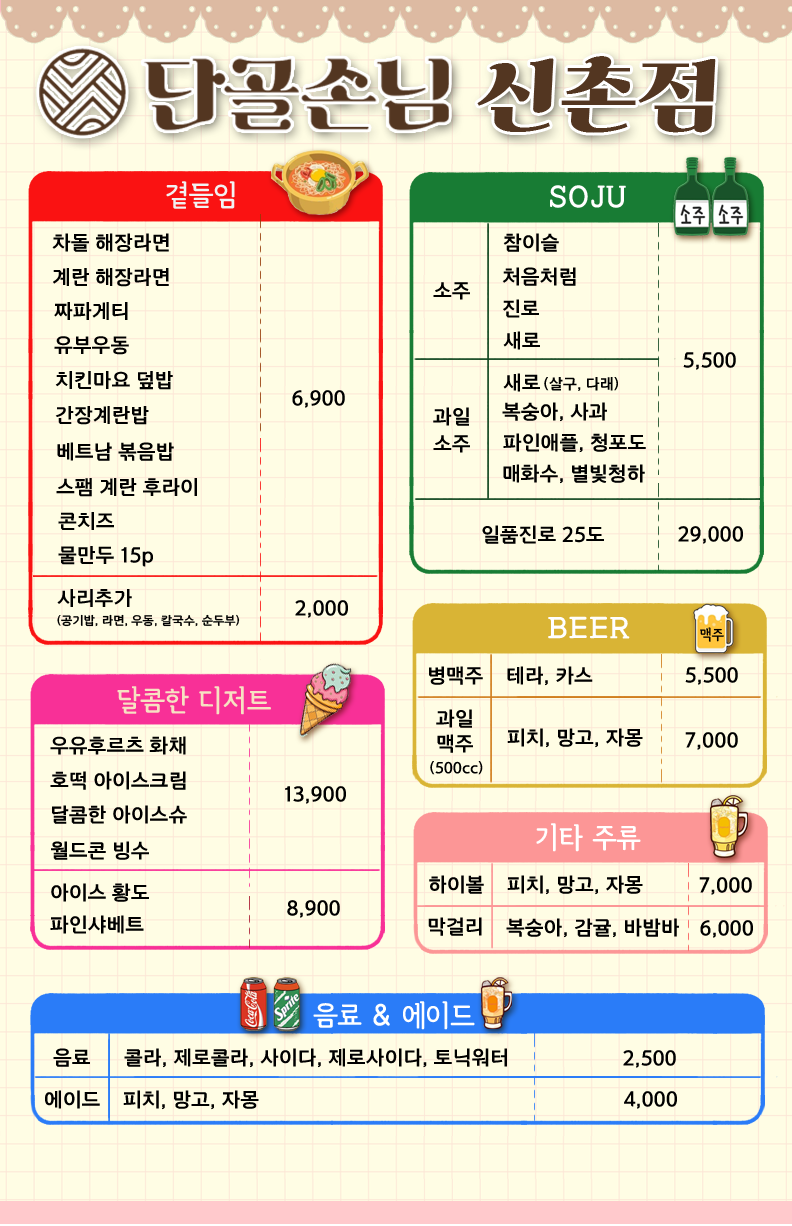
<style>
.page{position:relative;width:792px;height:1226px;background:#fffde4}
.page>*{position:absolute;margin:0}
.t1{font:82px "ghanachoco";color:#533621}
.t2{font:30px "Pix_HeummTalnemogulim162";color:#f2f2f2}
.t3{font:30px "Pix_HeummTalnemogulim162";color:#ffffff}
.t4{font:20px "ELANDChoiceB";color:#000000}
.t5{font:15px "ELANDChoiceB";color:#000000}
.t6{font:12px "ELANDChoiceB";color:#000000}
.t7{font:15px "Pix_HeummTalnemogulim162";color:#000000}
.t8{font:30px "Pix_HeummTalnemogulim162";color:#f7e1c2}
</style>
<div class="page">
<p class="t1" style="left:477px;top:56px;width:239px;height:77px">신촌점</p>
<p class="t2" style="left:166px;top:181px;width:69px;height:28px">곁들임 메뉴</p>
<p class="t3" style="left:550px;top:185px;width:76px;height:23px">SOJU</p>
<p class="t4" style="left:52px;top:233px;width:117px;height:19px">차돌 해장라면</p>
<p class="t4" style="left:503px;top:233px;width:56px;height:19px">참이슬</p>
<p class="t4" style="left:53px;top:268px;width:116px;height:19px">계란 해장라면</p>
<p class="t4" style="left:502px;top:267px;width:74px;height:19px">처음처럼</p>
<p class="t4" style="left:433px;top:282px;width:37px;height:18px">소주</p>
<p class="t4" style="left:54px;top:302px;width:74px;height:18px">짜파게티</p>
<p class="t4" style="left:503px;top:299px;width:36px;height:19px">진로</p>
<p class="t4" style="left:54px;top:336px;width:75px;height:19px">유부우동</p>
<p class="t4" style="left:503px;top:331px;width:37px;height:19px">새로</p>
<p class="t4" style="left:683px;top:352px;width:53px;height:18px">5,500</p>
<p class="t4" style="left:55px;top:371px;width:118px;height:19px">치킨마요 덮밥</p>
<p class="t4" style="left:503px;top:373px;width:37px;height:19px">새로</p>
<p class="t5" style="left:544px;top:377px;width:74px;height:14px">(살구, 다래)</p>
<p class="t4" style="left:292px;top:390px;width:53px;height:18px">6,900</p>
<p class="t4" style="left:55px;top:406px;width:94px;height:19px">간장계란밥</p>
<p class="t4" style="left:433px;top:407px;width:36px;height:19px">과일</p>
<p class="t4" style="left:502px;top:402px;width:105px;height:20px">복숭아, 사과</p>
<p class="t4" style="left:433px;top:435px;width:37px;height:18px">소주</p>
<p class="t4" style="left:503px;top:433px;width:143px;height:20px">파인애플, 청포도</p>
<p class="t4" style="left:57px;top:442px;width:117px;height:19px">베트남 볶음밥</p>
<p class="t4" style="left:503px;top:464px;width:142px;height:20px">매화수, 별빛청하</p>
<p class="t4" style="left:56px;top:478px;width:141px;height:19px">스팸 계란 후라이</p>
<p class="t4" style="left:58px;top:512px;width:56px;height:18px">콘치즈</p>
<p class="t4" style="left:482px;top:525px;width:122px;height:19px">일품진로 25도</p>
<p class="t4" style="left:678px;top:526px;width:65px;height:18px">29,000</p>
<p class="t4" style="left:58px;top:546px;width:95px;height:21px">물만두 15p</p>
<p class="t4" style="left:57px;top:589px;width:75px;height:18px">사리추가</p>
<p class="t4" style="left:295px;top:600px;width:53px;height:18px">2,000</p>
<p class="t6" style="left:57px;top:614px;width:183px;height:13px">(공기밥, 라면, 우동, 칼국수, 순두부)</p>
<p class="t3" style="left:548px;top:616px;width:82px;height:23px">BEER</p>
<p class="t7" style="left:700px;top:627px;width:24px;height:15px">맥주</p>
<p class="t4" style="left:429px;top:666px;width:54px;height:19px">병맥주</p>
<p class="t4" style="left:507px;top:666px;width:86px;height:20px">테라, 카스</p>
<p class="t4" style="left:685px;top:667px;width:53px;height:18px">5,500</p>
<p class="t8" style="left:117px;top:686px;width:154px;height:29px">달콤한 디저트</p>
<p class="t4" style="left:436px;top:709px;width:36px;height:19px">과일</p>
<p class="t4" style="left:50px;top:736px;width:136px;height:19px">우유후르츠 화채</p>
<p class="t4" style="left:437px;top:734px;width:36px;height:19px">맥주</p>
<p class="t4" style="left:507px;top:728px;width:136px;height:20px">피치, 망고, 자몽</p>
<p class="t4" style="left:685px;top:732px;width:53px;height:18px">7,000</p>
<p class="t5" style="left:430px;top:761px;width:53px;height:14px">(500cc)</p>
<p class="t4" style="left:50px;top:771px;width:136px;height:19px">호떡 아이스크림</p>
<p class="t4" style="left:285px;top:786px;width:61px;height:18px">13,900</p>
<p class="t4" style="left:52px;top:805px;width:135px;height:19px">달콤한 아이스슈</p>
<p class="t3" style="left:536px;top:823px;width:105px;height:29px">기타 주류</p>
<p class="t4" style="left:51px;top:841px;width:98px;height:19px">월드콘 빙수</p>
<p class="t4" style="left:429px;top:875px;width:55px;height:19px">하이볼</p>
<p class="t4" style="left:507px;top:875px;width:136px;height:20px">피치, 망고, 자몽</p>
<p class="t4" style="left:699px;top:877px;width:53px;height:18px">7,000</p>
<p class="t4" style="left:51px;top:883px;width:98px;height:19px">아이스 황도</p>
<p class="t4" style="left:287px;top:900px;width:53px;height:18px">8,900</p>
<p class="t4" style="left:50px;top:915px;width:94px;height:19px">파인샤베트</p>
<p class="t4" style="left:428px;top:917px;width:54px;height:19px">막걸리</p>
<p class="t4" style="left:506px;top:918px;width:173px;height:20px">복숭아, 감귤, 바밤바</p>
<p class="t4" style="left:700px;top:920px;width:53px;height:18px">6,000</p>
<p class="t3" style="left:313px;top:1001px;width:162px;height:29px">음료 &amp; 에이드</p>
<p class="t4" style="left:53px;top:1048px;width:37px;height:19px">음료</p>
<p class="t4" style="left:124px;top:1048px;width:383px;height:20px">콜라, 제로콜라, 사이다, 제로사이다, 토닉워터</p>
<p class="t4" style="left:623px;top:1050px;width:53px;height:18px">2,500</p>
<p class="t4" style="left:45px;top:1090px;width:55px;height:19px">에이드</p>
<p class="t4" style="left:123px;top:1090px;width:136px;height:20px">피치, 망고, 자몽</p>
<p class="t4" style="left:624px;top:1091px;width:53px;height:18px">4,000</p>
</div>
